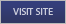
<style>
.page{position:relative;width:66px;height:24px}
.page>*{position:absolute;margin:0}
.t1{font:10px "MyriadPro-Regular";color:#caccda;text-transform:uppercase}
</style>
<div class="page">
<p class="t1" style="left:13px;top:8px;width:40px;height:7px">Visit Site</p>
</div>
